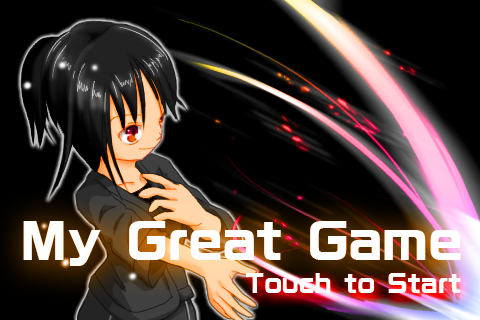
<style>
.page{position:relative;width:480px;height:320px;background:#000000}
.page>*{position:absolute;margin:0}
.t1{font:48px "RFGSanSrf-Bd-83pv-RKSJ-H";letter-spacing:-0.025em;color:#ffffff}
.t2{font:24px "RFGSanSrf-Bd-83pv-RKSJ-H";letter-spacing:-0.025em;color:#ffffff}
</style>
<div class="page">
<p class="t1" style="left:23px;top:221px;width:438px;height:45px">My Great Game</p>
<p class="t2" style="left:246px;top:273px;width:215px;height:20px">Touch to Start</p>
</div>
